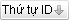
<style>
.page{position:relative;width:69px;height:20px;background:#ffffff}
.page>*{position:absolute;margin:0}
.t1{font:12px "ArialMT";color:#000000}
</style>
<div class="page">
<p class="t1" style="left:2px;top:4px;width:50px;height:12px">Thứ tự ID</p>
</div>
